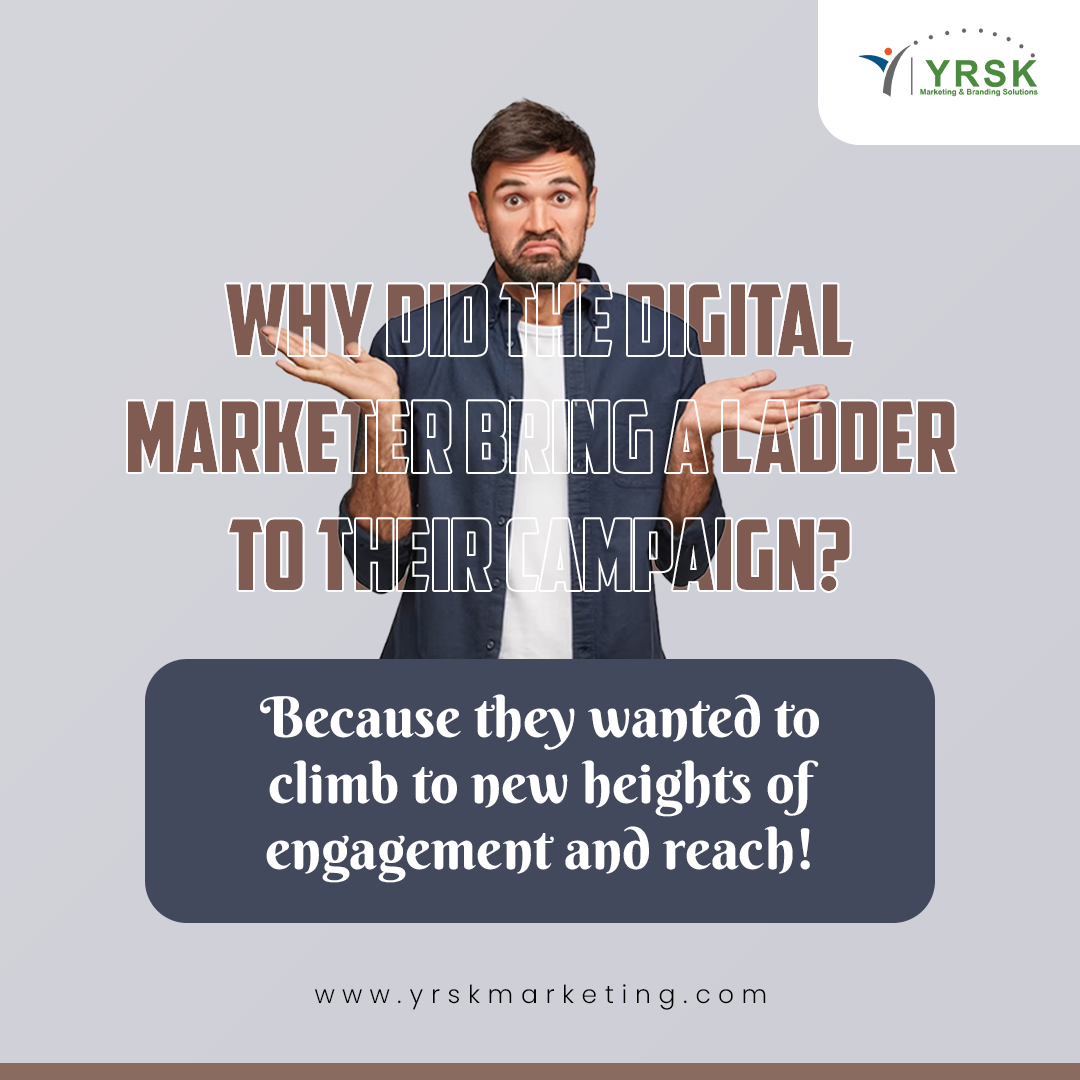
<style>
.page{position:relative;width:1080px;height:1080px}
.page>*{position:absolute;margin:0}
.t1{font:97.6px "AmericanCaptain"}
.t2{font:56.1px/66px "BerkshireSwash-Regular";color:#ffffff}
.t3{font:25px "Poppins-Light";letter-spacing:0.3em;color:#000000}
</style>
<div class="page">
<p class="t1" style="left:128px;top:284px;width:828px;height:307px;text-align:center">Why did the digital marketer bring a ladder to their campaign?</p>
<p class="t1" style="left:128px;top:284px;width:828px;height:307px;text-align:center">Why did the digital marketer bring a ladder to their campaign?</p>
<p class="t2" style="left:260px;top:694px;width:559px;height:189px;text-align:center">Because they wanted to climb to new heights of engagement and reach!</p>
<p class="t3" style="left:315px;top:984px;width:451px;height:26px">www.yrskmarketing.com</p>
</div>
